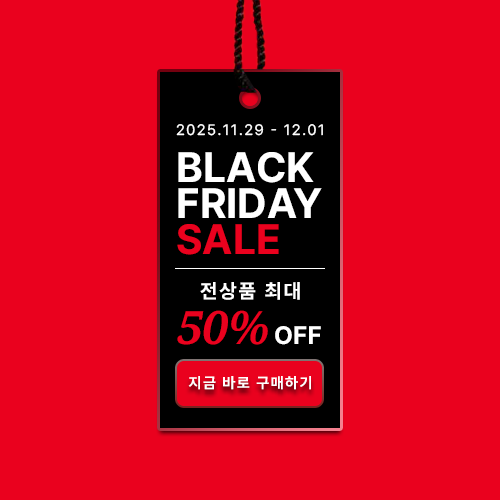
<style>
.page{position:relative;width:500px;height:500px;background:#ea011e}
.page>*{position:absolute;margin:0}
.t1{font:15px "Pretendard-Regular";letter-spacing:0.1em;color:#ffffff}
.t2{font:42px/36px "Pretendard-Bold";color:#ffffff}
.t3{font:42px/36px "Pretendard-Bold";letter-spacing:-0.1em;color:#ffffff}
.t4{font:42px/36px "Pretendard-Bold";color:#ea011e}
.t5{font:20px "Pretendard-Bold";letter-spacing:0.1em;color:#ffffff}
.t6{font:25px "Pretendard-Bold";color:#ffffff;text-transform:uppercase}
.t7{font:46px "NotoSerif-BoldItalic";color:#ea011e}
.t8{font:46px "NotoSerif-BoldItalic";letter-spacing:0.1em;color:#ea011e}
.t9{font:15px "Pretendard-Bold";letter-spacing:0.1em;color:#ffffff}
</style>
<div class="page">
<p class="t1" style="left:176px;top:124px;width:147px;height:12px">2025.11.29 - 12.01</p>
<p class="t2" style="left:177px;top:152px;width:145px;height:103px">BLACK<br>FRID<span class="t3">AY<br></span><span class="t4">SALE</span></p>
<p class="t5" style="left:200px;top:282px;width:100px;height:18px">전상품 최대</p>
<p class="t6" style="left:177px;top:310px;width:144px;height:35px"><span class="t7">50</span><span class="t8">%</span>off</p>
<p class="t9" style="left:188px;top:376px;width:123px;height:14px">지금 바로 구매하기</p>
</div>
